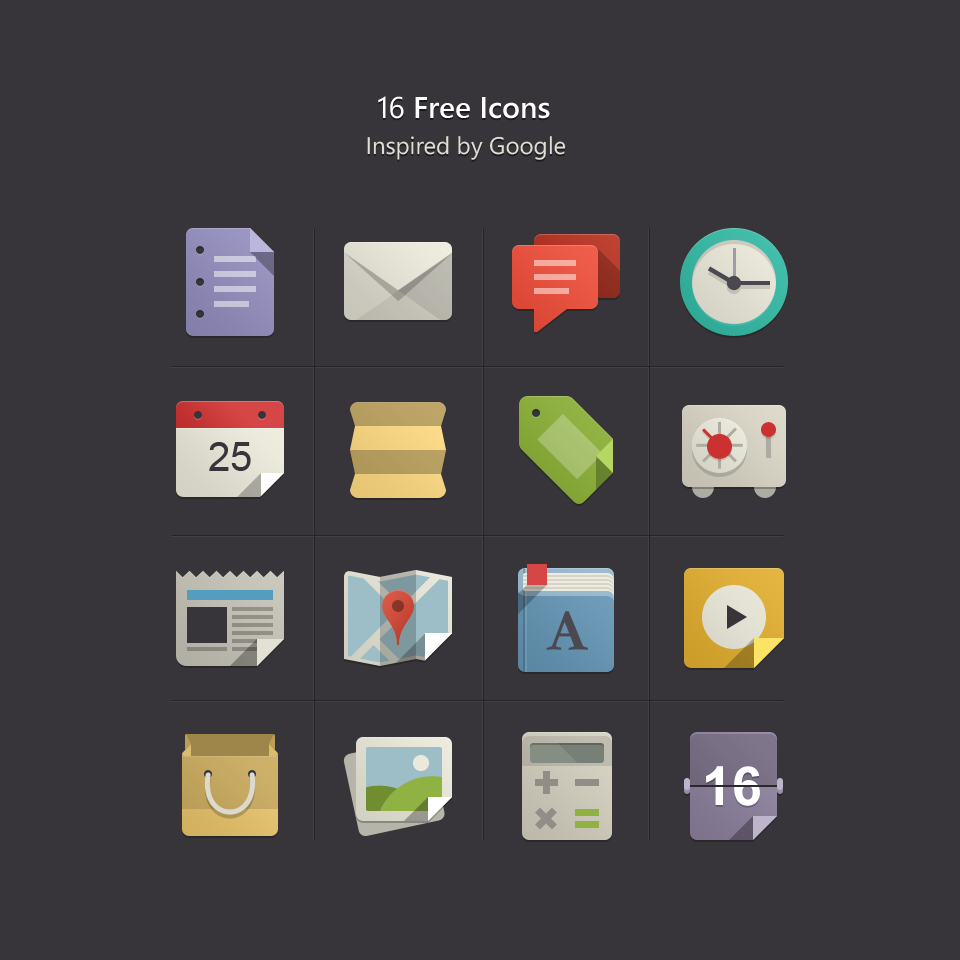
<style>
.page{position:relative;width:960px;height:960px;background:#37353a}
.page>*{position:absolute;margin:0}
.t1{font:24px/36px "SegoeWP";color:#e0dfd6}
.t2{font:30px/36px "SegoeWP";color:#ffffff}
.t3{font:30px/36px "SegoeWP-Semibold";color:#ffffff}
.t4{font:40px "ArialMT";color:#37353a}
</style>
<div class="page">
<p class="t1" style="left:367px;top:96px;width:199px;height:64px;text-align:center"><span class="t2">16</span><span class="t3"> Free Icons<br></span>Inspired by Google</p>
<p class="t4" style="left:209px;top:442px;width:42px;height:29px">25</p>
</div>
